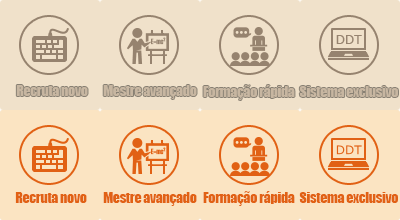
<style>
.page{position:relative;width:400px;height:220px;background:#fbe4c2}
.page>*{position:absolute;margin:0}
.t1{font:14px "Impact";letter-spacing:-0.025em;color:#c7b6a1}
.t2{font:14px "Impact";letter-spacing:-0.025em;color:#e16114}
</style>
<div class="page">
<p class="t1" style="left:299px;top:86px;width:99px;height:11px">Sistema exclusivo</p>
<p class="t2" style="left:15px;top:192px;width:72px;height:11px">Recruta novo</p>
<p class="t2" style="left:103px;top:192px;width:94px;height:14px">Mestre avançado</p>
<p class="t2" style="left:203px;top:191px;width:92px;height:15px">Formação rápida</p>
<p class="t2" style="left:299px;top:192px;width:99px;height:11px">Sistema exclusivo</p>
</div>
